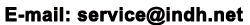
<style>
.page{position:relative;width:250px;height:25px;background:#ffffff}
.page>*{position:absolute;margin:0}
.t1{font:19px "Arial-BoldMT";color:#040606;font-weight:bold}
</style>
<div class="page">
<p class="t1" style="left:5px;top:6px;width:238px;height:20px">E-mail: service@indh.net</p>
</div>
